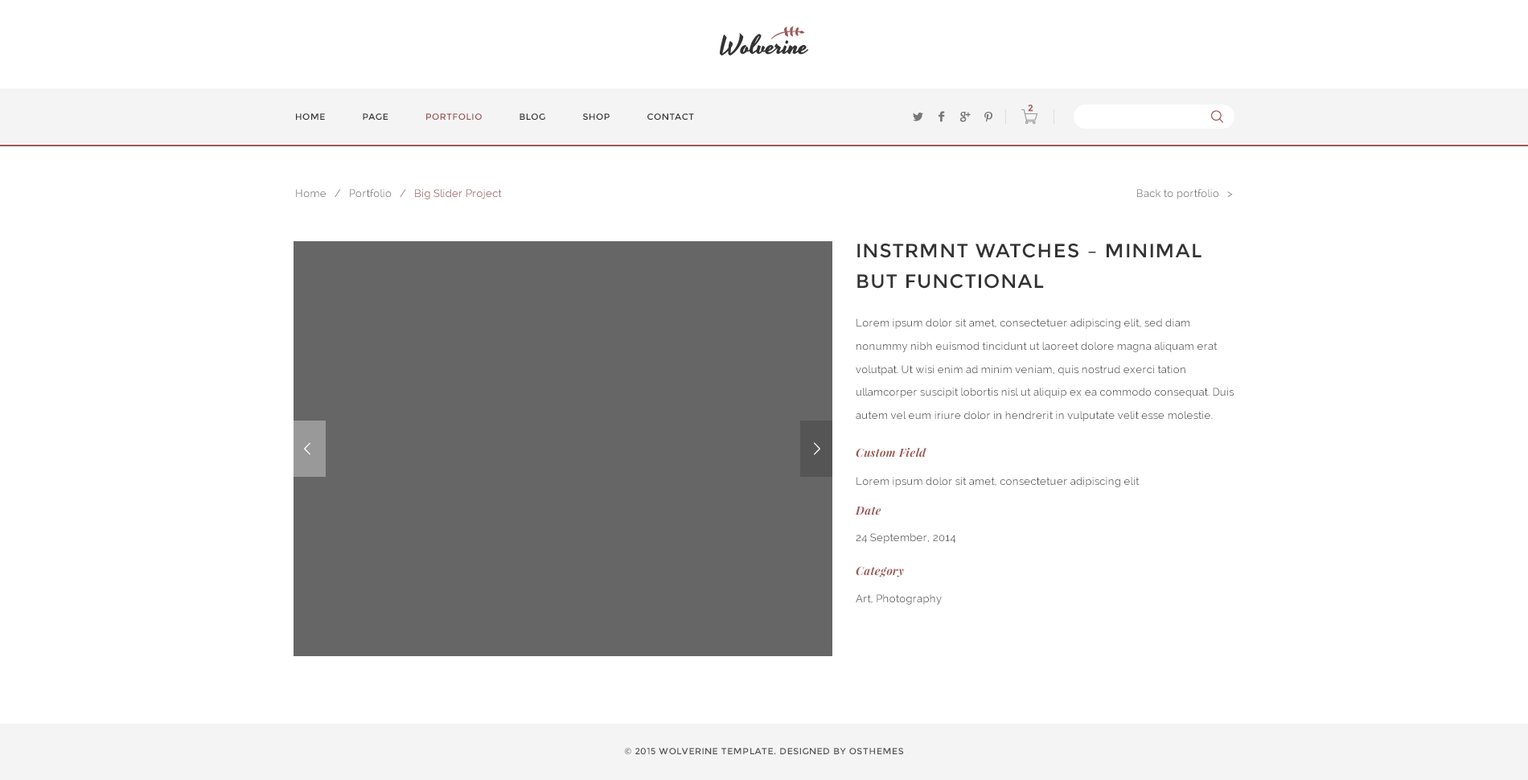
<style>
.page{position:relative;width:1528px;height:780px;background:#ffffff}
.page>*{position:absolute;margin:0}
.t1{font:8.8px "Montserrat-Regular";letter-spacing:0.05em;color:#333333}
.t2{font:8.8px "Montserrat-Regular";letter-spacing:0.05em;color:#9b5a57}
.t3{font:8.8px "Montserrat-Regular";color:#9a5a58;font-weight:bold}
.t4{font:10.5px "Raleway";letter-spacing:0.02em;color:#777777}
.t5{font:10.5px "Raleway";letter-spacing:0.02em;color:#9b5a57}
.t6{font:19.3px/30.9px "Montserrat-Regular";letter-spacing:0.05em;color:#333333}
.t7{font:10.5px/23px "Raleway";letter-spacing:0.02em;color:#525252}
.t8{font:11.3px "PlayfairDisplay-BoldItalic";letter-spacing:0.02em;color:#9c5b57}
.t9{font:10.5px "Raleway";letter-spacing:0.02em;color:#535353}
.t10{font:8.8px "Montserrat-Regular";letter-spacing:0.05em;color:#545454}
</style>
<div class="page">
<p class="t1" style="left:296px;top:113px;width:398px;height:7px">HOME      PAGE      <span class="t2">PORTFOLIO</span>      BLOG      SHOP      CONTACT</p>
<p class="t3" style="left:1028px;top:105px;width:6px;height:7px">2</p>
<p class="t4" style="left:296px;top:189px;width:206px;height:10px">Home   /   Portfolio   /   <span class="t5">Big Slider Project</span></p>
<p class="t4" style="left:1137px;top:189px;width:96px;height:10px">Back to portfolio   &gt;</p>
<p class="t6" style="left:857px;top:243px;width:345px;height:46px">INSTRMNT WATCHES – MINIMAL BUT FUNCTIONAL</p>
<p class="t7" style="left:856px;top:319px;width:378px;height:102px">Lorem ipsum dolor sit amet, consectetuer adipiscing elit, sed diam nonummy nibh euismod tincidunt ut laoreet dolore magna aliquam erat volutpat. Ut wisi enim ad minim veniam, quis nostrud exerci tation ullamcorper suscipit lobortis nisl ut aliquip ex ea commodo consequat. Duis autem vel eum iriure dolor in hendrerit in vulputate velit esse molestie.</p>
<p class="t8" style="left:856px;top:448px;width:71px;height:10px">Custom Field</p>
<p class="t9" style="left:857px;top:477px;width:283px;height:10px">Lorem ipsum dolor sit amet, consectetuer adipiscing elit</p>
<p class="t8" style="left:855px;top:507px;width:27px;height:9px">Date</p>
<p class="t9" style="left:856px;top:533px;width:100px;height:11px">24 September, 2014</p>
<p class="t8" style="left:856px;top:566px;width:48px;height:12px">Category</p>
<p class="t9" style="left:856px;top:594px;width:86px;height:11px">Art, Photography</p>
<p class="t10" style="left:624px;top:748px;width:280px;height:7px">© 2015 WOLVERINE TEMPLATE. DESIGNED BY OSTHEMES</p>
</div>
